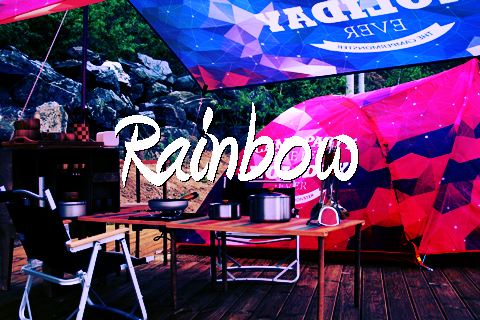
<style>
.page{position:relative;width:480px;height:320px}
.page>*{position:absolute;margin:0}
.t1{font:128px "Amienne-Bold";color:#ffffff}
</style>
<div class="page">
<p class="t1" style="left:115px;top:102px;width:243px;height:85px">Rainbow</p>
</div>
